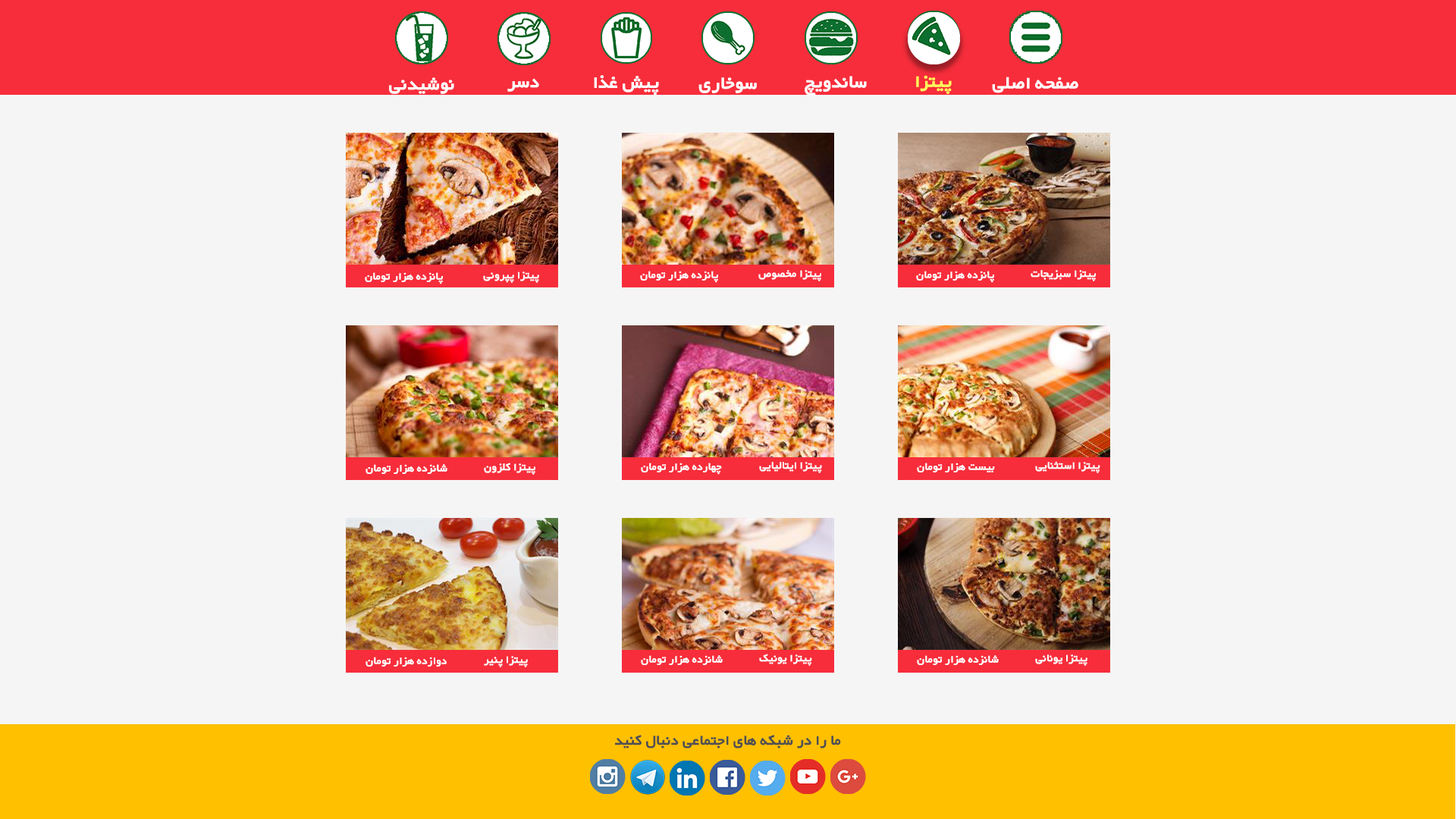
<style>
.page{position:relative;width:1456px;height:819px;background:#f5f5f5}
.page>*{position:absolute;margin:0}
.t1{font:22.7px "WyekanBold";color:#ffffff}
.t2{font:22.7px "WyekanBold";color:#fdff5d}
.t3{font:13.6px "WyekanBold";color:#ffffff}
.t4{font:18.4px "WyekanBold";color:#505050}
</style>
<div class="page">
<p class="t1" style="left:389px;top:77px;width:65px;height:17px">نوشیدنی</p>
<p class="t1" style="left:594px;top:75px;width:65px;height:20px">پیش غذا</p>
<p class="t1" style="left:698px;top:77px;width:59px;height:16px">سوخاری</p>
<p class="t1" style="left:805px;top:76px;width:62px;height:20px">ساندویچ</p>
<p class="t2" style="left:916px;top:75px;width:36px;height:19px">پیتزا</p>
<p class="t1" style="left:992px;top:77px;width:86px;height:16px">صفحه اصلی</p>
<p class="t1" style="left:507px;top:78px;width:32px;height:14px">دسر</p>
<p class="t3" style="left:758px;top:270px;width:63px;height:11px">پیتزا مخصوص</p>
<p class="t3" style="left:1031px;top:270px;width:65px;height:11px">پیتزا سبزیجات</p>
<p class="t3" style="left:365px;top:272px;width:78px;height:12px">پانزده هزار تومان</p>
<p class="t3" style="left:483px;top:271px;width:56px;height:12px">پیتزا پپرونی</p>
<p class="t3" style="left:640px;top:271px;width:78px;height:12px">پانزده هزار تومان</p>
<p class="t3" style="left:916px;top:271px;width:78px;height:12px">پانزده هزار تومان</p>
<p class="t3" style="left:759px;top:462px;width:63px;height:11px">پیتزا ایتالیایی</p>
<p class="t3" style="left:1035px;top:461px;width:65px;height:12px">پیتزا استثنایی</p>
<p class="t3" style="left:366px;top:464px;width:81px;height:10px">شانزده هزار تومان</p>
<p class="t3" style="left:484px;top:463px;width:51px;height:12px">پیتزا کلزون</p>
<p class="t3" style="left:641px;top:463px;width:81px;height:12px">چهارده هزار تومان</p>
<p class="t3" style="left:917px;top:463px;width:78px;height:9px">بیست هزار تومان</p>
<p class="t3" style="left:759px;top:654px;width:53px;height:12px">پیتزا یونیک</p>
<p class="t3" style="left:366px;top:657px;width:81px;height:10px">دوازده هزار تومان</p>
<p class="t3" style="left:484px;top:656px;width:44px;height:11px">پیتزا پنیر</p>
<p class="t3" style="left:641px;top:655px;width:82px;height:10px">شانزده هزار تومان</p>
<p class="t3" style="left:917px;top:655px;width:82px;height:10px">شانزده هزار تومان</p>
<p class="t3" style="left:1035px;top:654px;width:52px;height:12px">پیتزا یونانی</p>
<p class="t4" style="left:614px;top:735px;width:227px;height:13px">ما را در شبکه های اجتماعی دنبال کنید</p>
</div>
